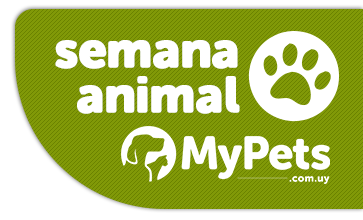
<style>
.page{position:relative;width:363px;height:220px;background:#819908}
.page>*{position:absolute;margin:0}
.t1{font:50.6px/44.9px "MuseoSansRounded-900";letter-spacing:-0.02em;color:#ffffff;font-weight:bold}
</style>
<div class="page">
<p class="t1" style="left:55px;top:40px;width:185px;height:74px;text-align:right">semana<br>animal</p>
</div>
